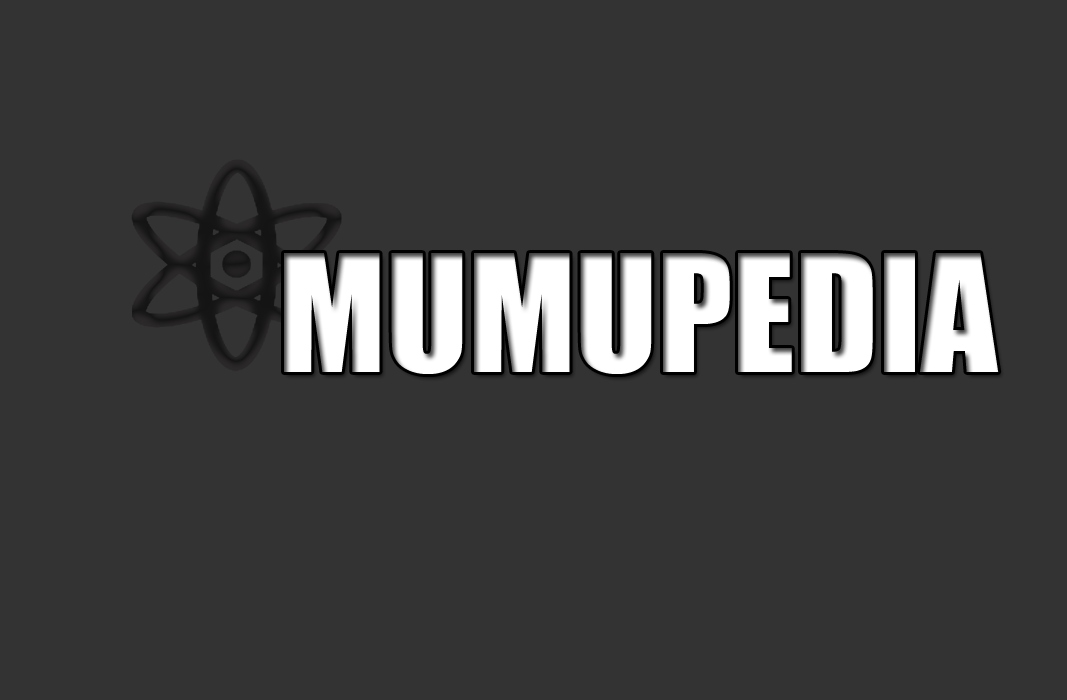
<style>
.page{position:relative;width:1067px;height:700px;background:#333333}
.page>*{position:absolute;margin:0}
.t1{font:150px "Impact";color:#ffffff}
</style>
<div class="page">
<p class="t1" style="left:284px;top:253px;width:715px;height:121px">MUMUPEDIA</p>
</div>
